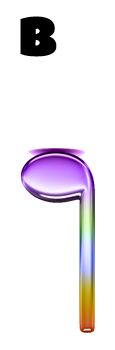
<style>
.page{position:relative;width:115px;height:350px;background:#ffffff}
.page>*{position:absolute;margin:0}
.t1{font:54px "LuckiestGuy-Regular";letter-spacing:0.005em;color:#000000;font-weight:bold;scale:1.11 1}
</style>
<div class="page">
<p class="t1" style="left:20px;top:16px;width:37px;height:41px">B</p>
</div>
